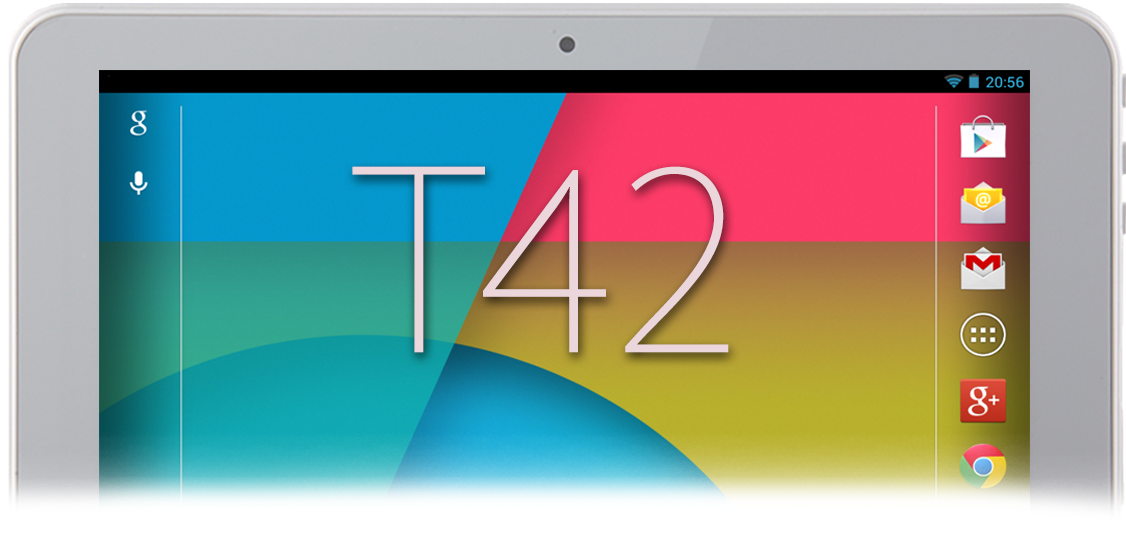
<style>
.page{position:relative;width:1126px;height:545px}
.page>*{position:absolute;margin:0}
.t1{font:245.4px "KozGoPr6N-ExtraLight";color:#ebd6db}
</style>
<div class="page">
<p class="t1" style="left:352px;top:166px;width:377px;height:187px">T42</p>
</div>
